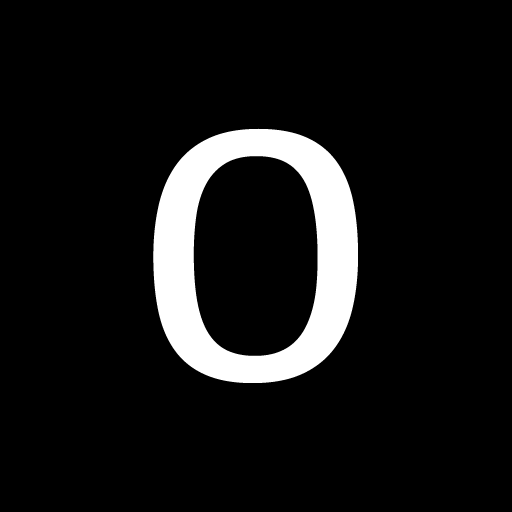
<style>
.page{position:relative;width:512px;height:512px;background:#000000}
.page>*{position:absolute;margin:0}
.t1{font:390px "Calibri";color:#ffffff;scale:1.2 1}
</style>
<div class="page">
<p class="t1" style="left:153px;top:128px;width:205px;height:255px">0</p>
</div>
